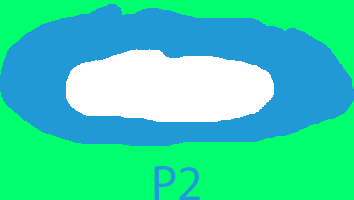
<style>
.page{position:relative;width:354px;height:200px;background:#00ff6d}
.page>*{position:absolute;margin:0}
.t1{font:12px "MyriadHebrew-Regular";color:#2099d6}
</style>
<div class="page">
<p class="t1" style="left:154px;top:166px;width:46px;height:34px">P2</p>
</div>
